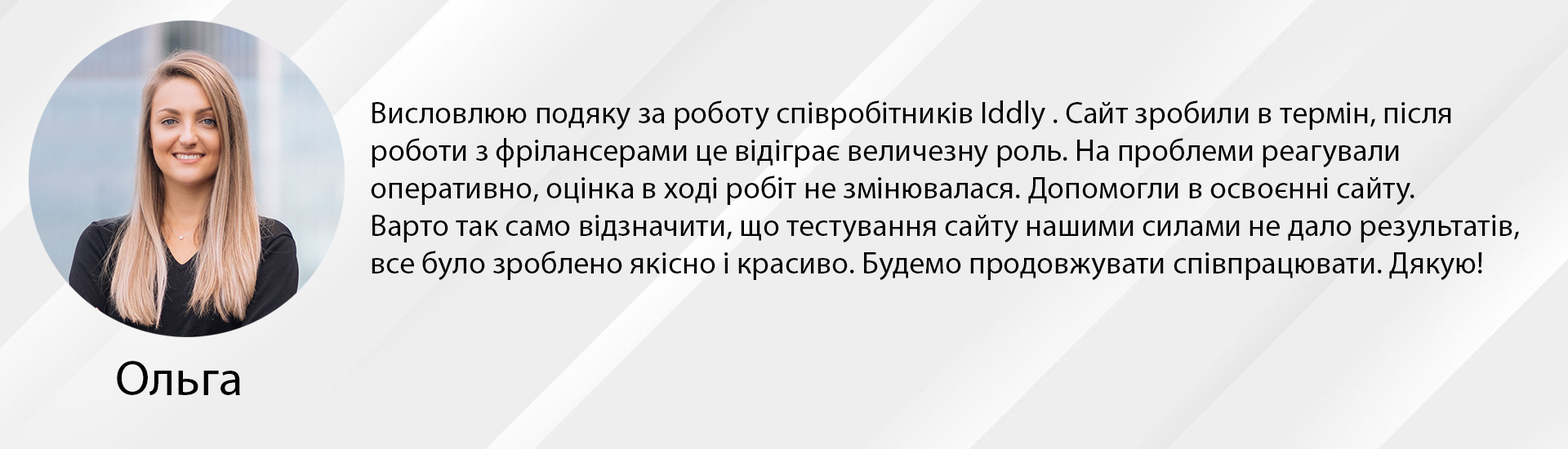
<style>
.page{position:relative;width:1568px;height:449px;background:#eeeeee}
.page>*{position:absolute;margin:0}
.t1{font:31.3px "MyriadPro-Regular";color:#000000}
.t2{font:50.1px "MyriadPro-Regular";color:#000000}
</style>
<div class="page">
<p class="t1" style="left:371px;top:100px;width:1148px;height:180px">Висловлюю подяку за роботу співробітників Iddly . Сайт зробили в термін, після <br>роботи з фрілансерами це відіграє величезну роль. На проблеми реагували <br>оперативно, оцінка в ході робіт не змінювалася. Допомогли в освоєнні сайту. <br>Варто так само відзначити, що тестування сайту нашими силами не дало результатів, <br>все було зроблено якісно і красиво. Будемо продовжувати співпрацювати. Дякую!</p>
<p class="t2" style="left:117px;top:361px;width:123px;height:34px">Ольга</p>
</div>
